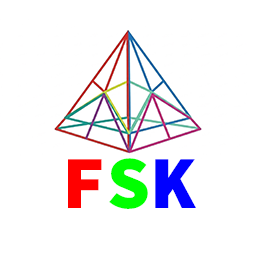
<style>
.page{position:relative;width:256px;height:256px;background:#ffffff}
.page>*{position:absolute;margin:0}
.t1{font:75px "SourceCodePro-Black";color:#ff0000}
.t2{font:75px "SourceCodePro-Black";color:#00ff00}
.t3{font:75px "SourceCodePro-Black";color:#0000ff}
</style>
<div class="page">
<p class="t1" style="left:68px;top:158px;width:128px;height:51px">F<span class="t2">S</span><span class="t3">K</span></p>
</div>
